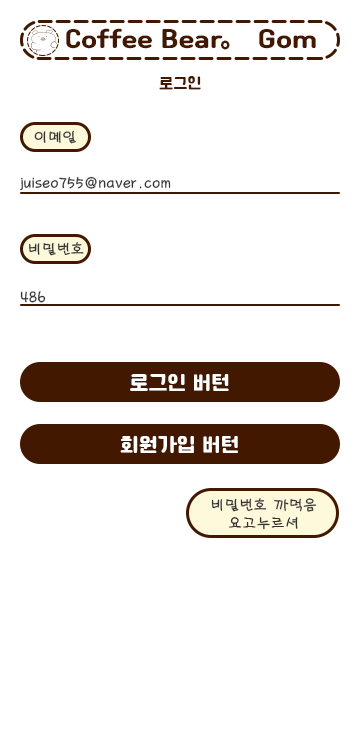
<style>
.page{position:relative;width:360px;height:740px;background:#ffffff}
.page>*{position:absolute;margin:0}
.t1{font:25px "Cafe24Ssurround";color:#421900}
.t2{font:25px "NotoSansKR-Black";color:#421900}
.t3{font:15px "Cafe24Ssurround";color:#421900}
.t4{font:15px "MDGaesung";color:#333333}
.t5{font:20px "Cafe24Ssurround";color:#ffffff}
</style>
<div class="page">
<p class="t1" style="left:66px;top:28px;width:250px;height:21px">Coffee Bear 。Gom</p>
<p class="t2" style="left:221px;top:40px;width:9px;height:10px">。</p>
<p class="t3" style="left:159px;top:76px;width:42px;height:14px">로그인</p>
<p class="t4" style="left:34px;top:130px;width:42px;height:14px">이메일</p>
<p class="t4" style="left:20px;top:176px;width:151px;height:15px">juiseo755@naver.com</p>
<p class="t4" style="left:29px;top:242px;width:55px;height:14px">비밀번호</p>
<p class="t4" style="left:20px;top:291px;width:26px;height:12px">486</p>
<p class="t5" style="left:130px;top:374px;width:99px;height:17px">로그인 버턴</p>
<p class="t5" style="left:120px;top:436px;width:118px;height:17px">회원가입 버턴</p>
<p class="t4" style="left:211px;top:498px;width:106px;height:32px;text-align:center">비밀번호 까먹음<br>요고누르셔</p>
</div>
